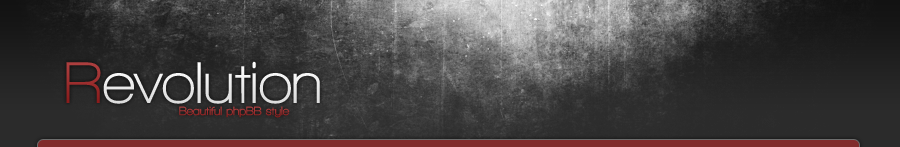
<style>
.page{position:relative;width:900px;height:147px}
.page>*{position:absolute;margin:0}
.t1{font:60px "WalkwayBold";color:#e6e6e6}
.t2{font:12px "WalkwayBold";color:#9f1f1f}
</style>
<div class="page">
<p class="t1" style="left:66px;top:61px;width:254px;height:43px">Revolution</p>
<p class="t2" style="left:179px;top:106px;width:111px;height:12px">Beautiful phpBB style</p>
</div>
